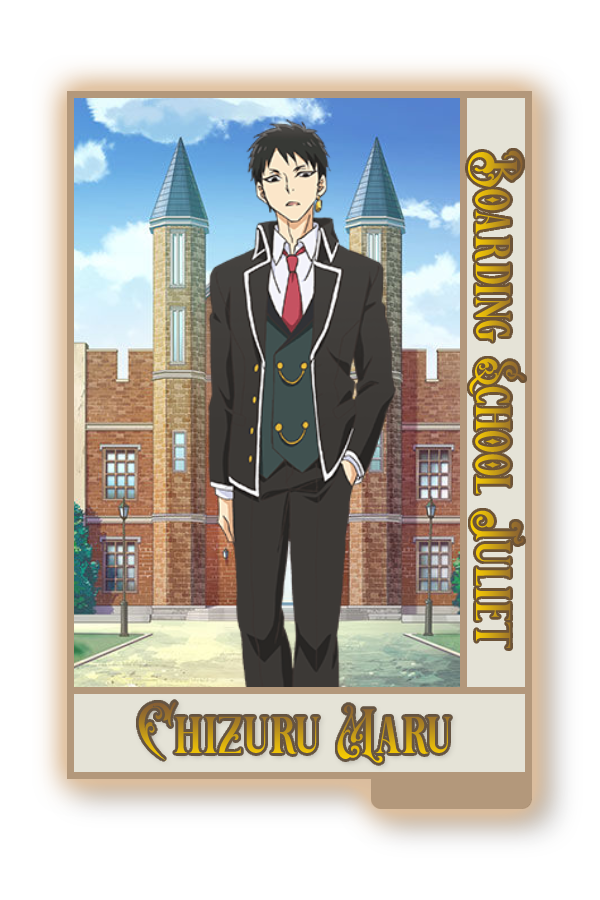
<style>
.page{position:relative;width:600px;height:900px;background:#ffffff}
.page>*{position:absolute;margin:0}
.t1{font:58.9px "VictorianDecadeDemoVersion"}
.t2{font:62.3px "VictorianDecadeDemoVersion"}
</style>
<div class="page">
<p class="t1" style="left:468px;top:150px;width:57px;height:498px;rotate:90deg">Boarding School Juliet</p>
<p class="t2" style="left:135px;top:702px;width:317px;height:61px">Chizuru Maru</p>
</div>
